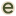
<style>
.page{position:relative;width:16px;height:16px;background:#ffffff}
.page>*{position:absolute;margin:0}
.t1{font:22px "AvenirLTStd-Roman";color:#46502b}
</style>
<div class="page">
<p class="t1" style="left:2px;top:2px;width:12px;height:12px">e</p>
</div>
